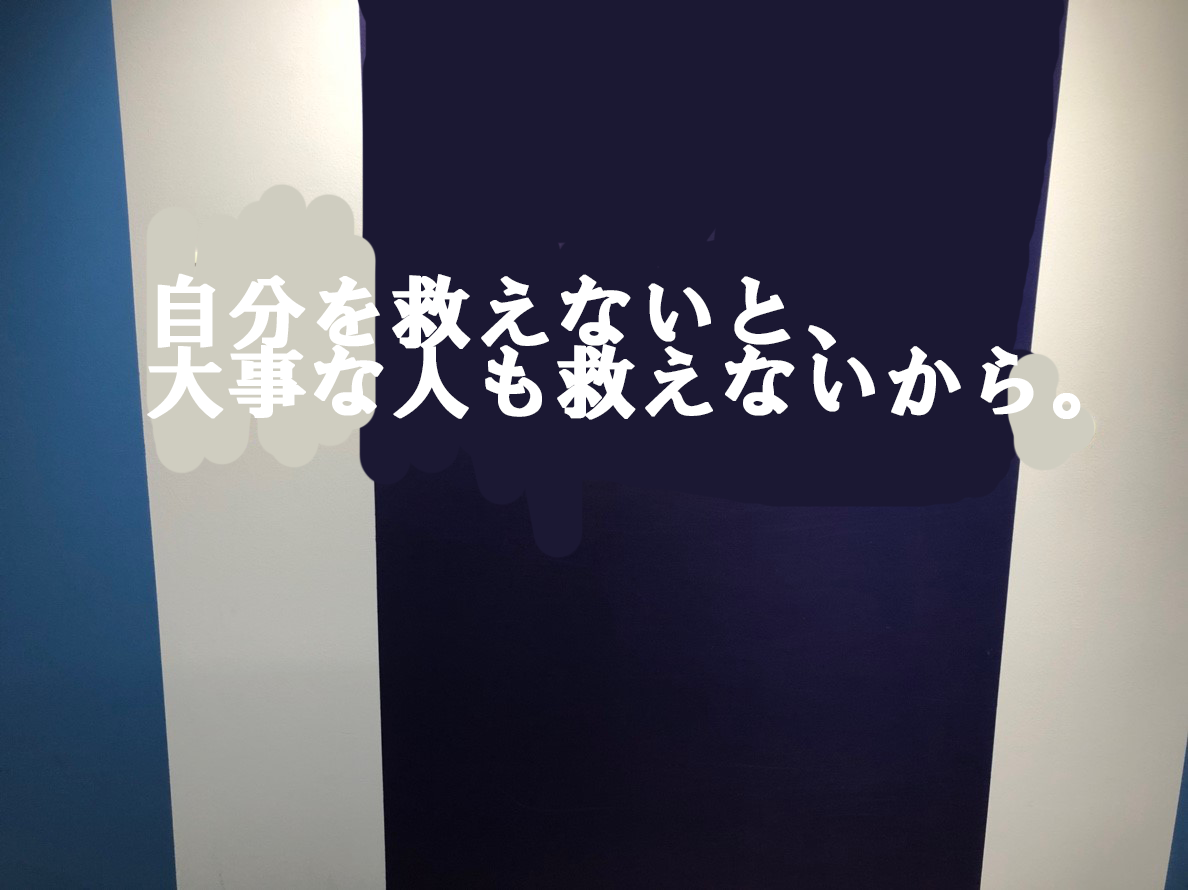
<style>
.page{position:relative;width:1188px;height:890px;background:#1b1833}
.page>*{position:absolute;margin:0}
.t1{font:80px "HGSSoeiPresenceEB";color:#ffffff;font-weight:bold}
</style>
<div class="page">
<p class="t1" style="left:147px;top:273px;width:934px;height:147px">自分を救えないと、<br>大事な人も救えないから。</p>
</div>
